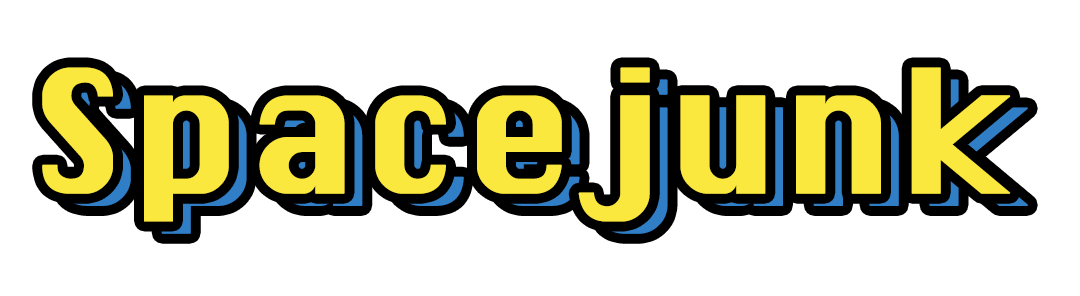
<style>
.page{position:relative;width:1080px;height:296px;background:#ffffff}
.page>*{position:absolute;margin:0}
.t1{font:166.7px "Silom";color:#fbe83e;font-weight:bold}
</style>
<div class="page">
<p class="t1" style="left:42px;top:67px;width:969px;height:155px">Spacejunk</p>
</div>
